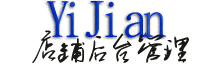
<style>
.page{position:relative;width:215px;height:69px;background:#ffffff}
.page>*{position:absolute;margin:0}
.t1{font:48px "ª÷±ö¿ûµ§­Ó©Ê¦r§Î";letter-spacing:-0.075em;color:#0230c1;scale:0.95 1}
.t2{font:30px "Ò¶¸ùÓÑ¸Ö±ÊÐÐÊé¼òÌå";letter-spacing:-0.075em;color:#191a16;scale:0.95 1}
</style>
<div class="page">
<p class="t1" style="left:47px;top:1px;width:119px;height:37px">YiJian</p>
<p class="t2" style="left:32px;top:30px;width:157px;height:33px">店铺后台管理</p>
</div>
